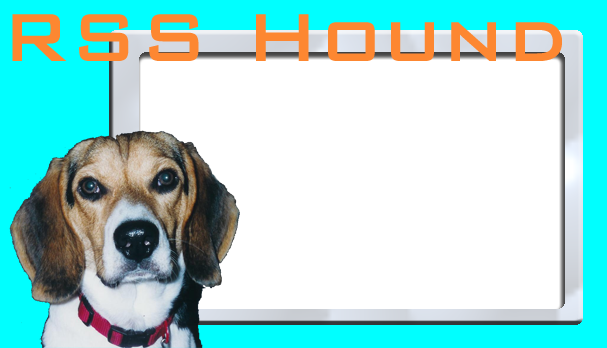
<style>
.page{position:relative;width:607px;height:348px;background:#ffffff}
.page>*{position:absolute;margin:0}
.t1{font:86.8px "BankGothicBT-Light";color:#fd8731;font-weight:bold}
</style>
<div class="page">
<p class="t1" style="left:12px;top:14px;width:550px;height:47px">RSS Hound</p>
</div>
